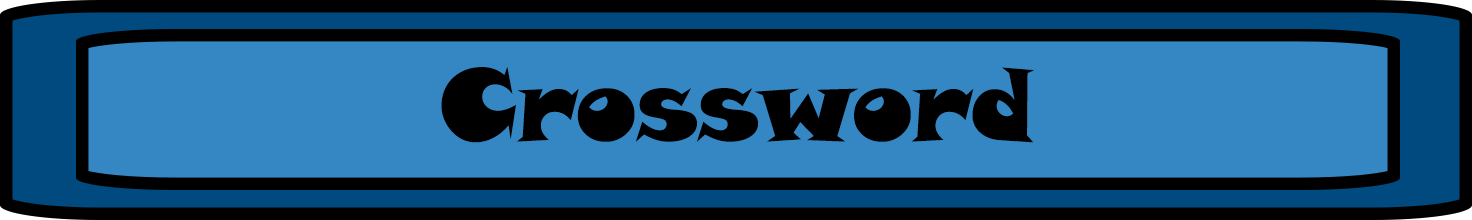
<style>
.page{position:relative;width:1472px;height:220px;background:#3587c3}
.page>*{position:absolute;margin:0}
.t1{font:100px "SnapITC-Regular";color:#000000}
</style>
<div class="page">
<p class="t1" style="left:441px;top:67px;width:593px;height:76px">Crossword</p>
</div>
